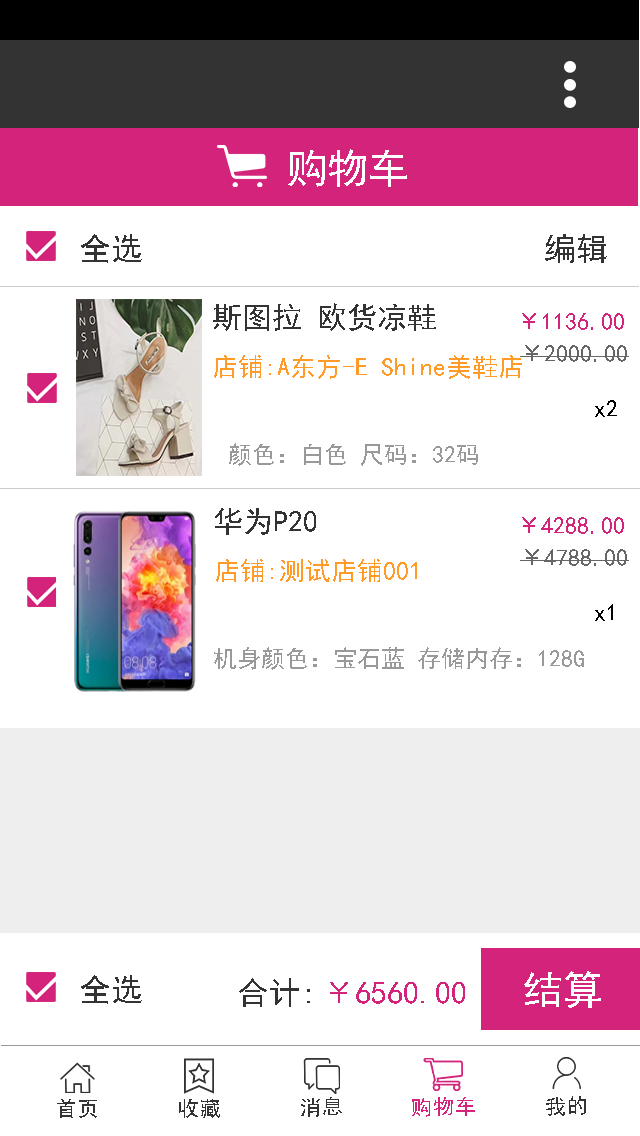
<style>
.page{position:relative;width:640px;height:1136px;background:#ffffff}
.page>*{position:absolute;margin:0}
.t1{font:70px "SimHei";color:#ffffff}
.t2{font:55px "SimHei";color:#333333}
.t3{font:30px "SimHei";color:#333333}
.t4{font:24px "SimHei";color:#d4237a}
.t5{font:24px "SimHei";color:#666666}
.t6{font:26px "SimHei";color:#ff9b26}
.t7{font:24px "SimHei";color:#000000}
.t8{font:24px "SimHei";color:#999999}
.t9{font:40px "SimHei";color:#ffffff}
.t10{font:55px "SimHei";color:#d4237a}
.t11{font:36px "SimHei";color:#333333}
.t12{font:36px "SimHei";color:#d4237a}
</style>
<div class="page">
<p class="t1" style="left:288px;top:149px;width:119px;height:38px">购物车</p>
<p class="t2" style="left:81px;top:234px;width:61px;height:29px">全选</p>
<p class="t2" style="left:545px;top:234px;width:62px;height:29px">编辑</p>
<p class="t3" style="left:213px;top:303px;width:223px;height:28px">斯图拉 欧货凉鞋</p>
<p class="t4" style="left:522px;top:313px;width:102px;height:17px">￥1136.00</p>
<p class="t5" style="left:520px;top:345px;width:109px;height:17px">￥2000.00</p>
<p class="t6" style="left:214px;top:355px;width:308px;height:24px">店铺:A东方-E Shine美鞋店</p>
<p class="t7" style="left:595px;top:400px;width:22px;height:17px">x2</p>
<p class="t8" style="left:229px;top:443px;width:249px;height:23px">颜色：白色 尺码：32码</p>
<p class="t3" style="left:215px;top:508px;width:101px;height:27px">华为P20</p>
<p class="t4" style="left:522px;top:517px;width:102px;height:17px">￥4288.00</p>
<p class="t5" style="left:520px;top:549px;width:109px;height:17px">￥4788.00</p>
<p class="t6" style="left:216px;top:559px;width:201px;height:23px">店铺:测试店铺001</p>
<p class="t7" style="left:595px;top:604px;width:18px;height:17px">x1</p>
<p class="t8" style="left:214px;top:647px;width:370px;height:23px">机身颜色：宝石蓝 存储内存：128G</p>
<p class="t2" style="left:81px;top:975px;width:61px;height:29px">全选</p>
<p class="t9" style="left:524px;top:971px;width:77px;height:37px">结算</p>
<p class="t2" style="left:239px;top:978px;width:71px;height:29px">合计:</p>
<p class="t10" style="left:330px;top:982px;width:135px;height:22px">￥6560.00</p>
<p class="t11" style="left:301px;top:1097px;width:41px;height:20px;rotate:-1deg">消息</p>
<p class="t12" style="left:412px;top:1097px;width:63px;height:20px;rotate:-1deg">购物车</p>
<p class="t11" style="left:546px;top:1096px;width:40px;height:20px;rotate:-1deg">我的</p>
<p class="t11" style="left:57px;top:1099px;width:40px;height:19px;rotate:-1deg">首页</p>
<p class="t11" style="left:179px;top:1099px;width:41px;height:19px;rotate:-1deg">收藏</p>
</div>
